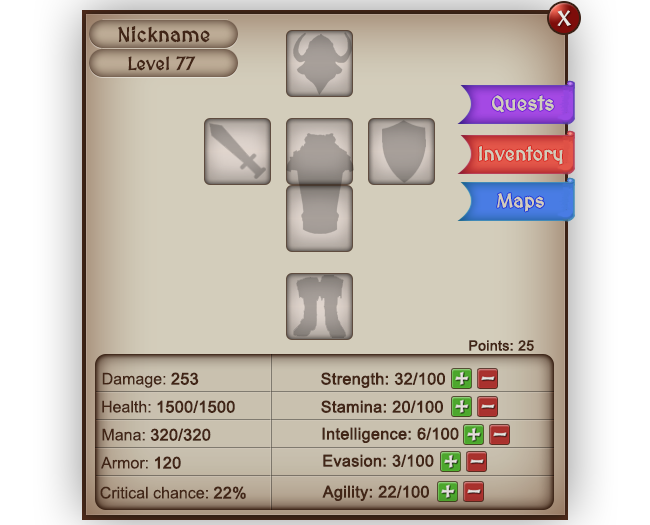
<style>
.page{position:relative;width:650px;height:525px}
.page>*{position:absolute;margin:0}
.t1{font:20px "MedievalSharp";color:#422617;font-weight:bold}
.t2{font:18px "MedievalSharp";color:#422617;font-weight:bold}
.t3{font:20px "MedievalSharp";color:#d3cdbb;font-weight:bold}
.t4{font:19px "MedievalSharp";color:#d3cdbb;font-weight:bold}
.t5{font:14px "ArialMT";color:#422617;font-weight:bold}
.t6{font:16px "ArialMT";color:#422617}
.t7{font:16px "ArialMT";color:#422617;font-weight:bold}
</style>
<div class="page">
<p class="t1" style="left:118px;top:26px;width:92px;height:17px">Nickname</p>
<p class="t2" style="left:128px;top:56px;width:68px;height:15px">Level 77</p>
<p class="t3" style="left:492px;top:95px;width:62px;height:18px">Quests</p>
<p class="t4" style="left:479px;top:146px;width:84px;height:19px">Inventory</p>
<p class="t4" style="left:497px;top:193px;width:47px;height:19px">Maps</p>
<p class="t5" style="left:469px;top:340px;width:65px;height:11px">Points: 25</p>
<p class="t6" style="left:102px;top:372px;width:97px;height:16px">Damage: <span class="t7">253</span></p>
<p class="t7" style="left:321px;top:372px;width:124px;height:16px">Strength: 32/100</p>
<p class="t7" style="left:102px;top:400px;width:133px;height:13px"><span class="t6">Health: </span>1500/1500</p>
<p class="t7" style="left:321px;top:400px;width:122px;height:13px">Stamina: 20/100</p>
<p class="t7" style="left:102px;top:428px;width:109px;height:13px"><span class="t6">Mana: </span>320/320</p>
<p class="t7" style="left:322px;top:427px;width:137px;height:16px">Intelligence: 6/100</p>
<p class="t6" style="left:101px;top:456px;width:80px;height:13px">Armor: <span class="t7">120</span></p>
<p class="t7" style="left:323px;top:454px;width:111px;height:13px">Evasion: 3/100</p>
<p class="t6" style="left:100px;top:486px;width:146px;height:14px">Critical chance: <span class="t7">22%</span></p>
<p class="t7" style="left:322px;top:485px;width:107px;height:16px">Agility: 22/100</p>
</div>
